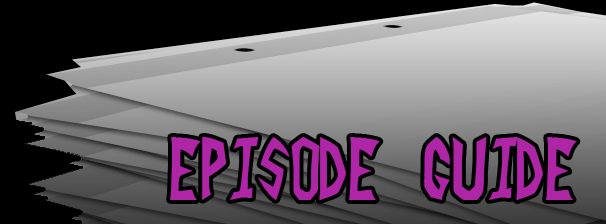
<style>
.page{position:relative;width:606px;height:224px;background:#000000}
.page>*{position:absolute;margin:0}
.t1{font:85.3px "INVADER";color:#ae26a6;text-transform:uppercase}
</style>
<div class="page">
<p class="t1" style="left:170px;top:137px;width:407px;height:63px">Episode Guide</p>
</div>
